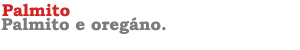
<style>
.page{position:relative;width:300px;height:50px;background:#ffffff}
.page>*{position:absolute;margin:0}
.t1{font:17px "BookmanOldStyle-Bold";color:#d42525}
.t2{font:17px "BookmanOldStyle-Bold";color:#7c7c79}
</style>
<div class="page">
<p class="t1" style="left:2px;top:3px;width:68px;height:14px">Palmito</p>
<p class="t2" style="left:1px;top:17px;width:165px;height:17px">Palmito e oregáno.</p>
</div>
